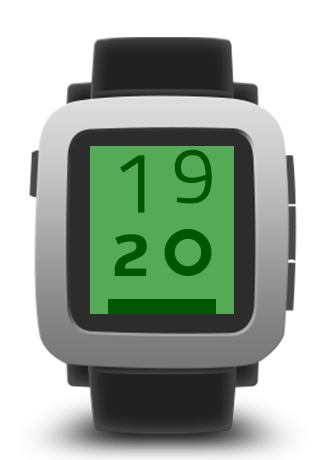
<style>
.page{position:relative;width:325px;height:460px;background:#ffffff}
.page>*{position:absolute;margin:0}
.t1{font:79px "TitilliumWeb-Regular";color:#005500}
.t2{font:87px "TitilliumWeb-Regular";color:#005500}
.t3{font:87px "Alef-Bold";color:#005500}
.t4{font:79px "Alef-Bold";color:#005500}
</style>
<div class="page">
<p class="t1" style="left:174px;top:149px;width:38px;height:55px">9</p>
<p class="t2" style="left:120px;top:155px;width:25px;height:58px">1</p>
<p class="t3" style="left:164px;top:229px;width:48px;height:47px">0</p>
<p class="t4" style="left:114px;top:234px;width:33px;height:42px">2</p>
</div>
